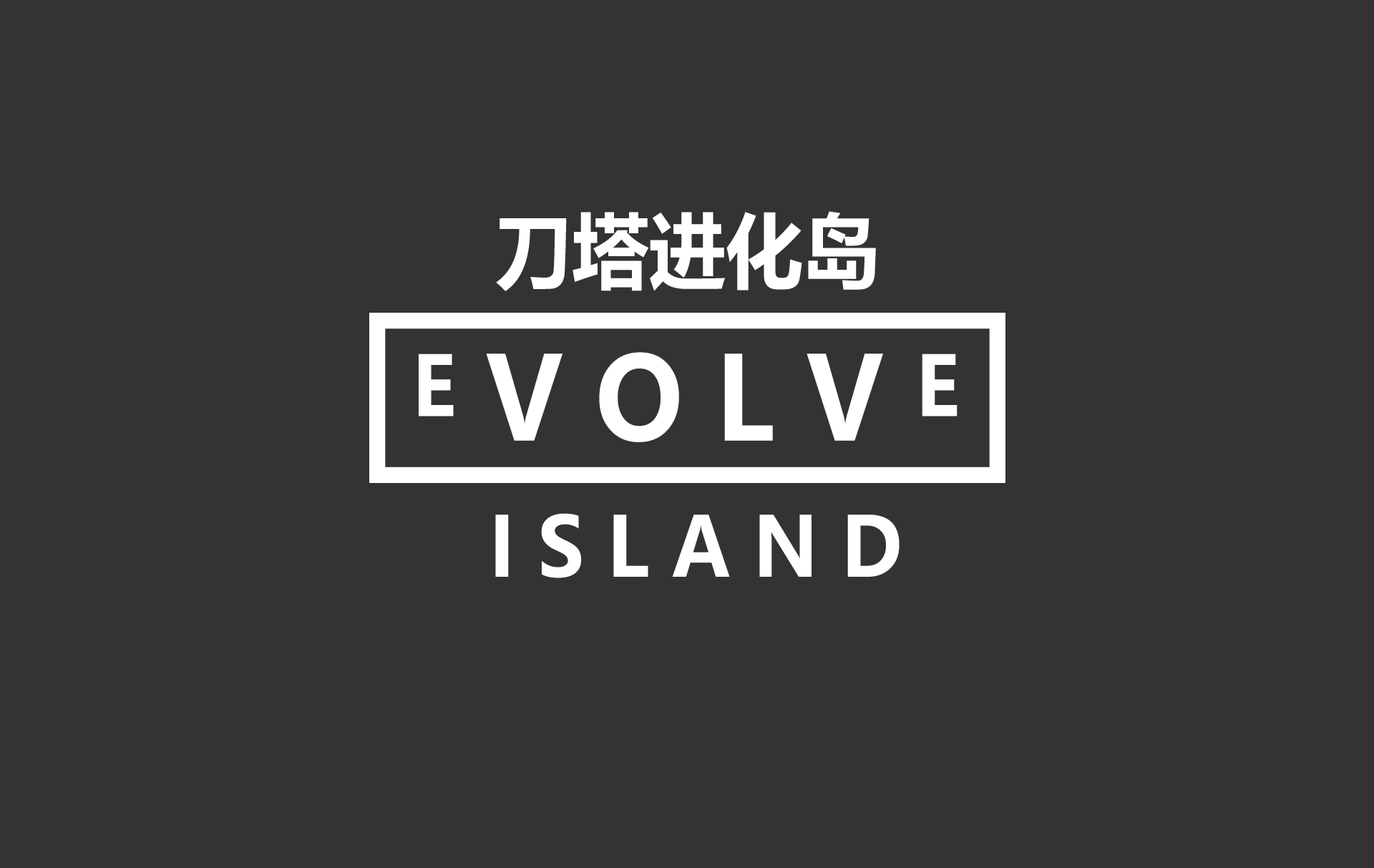
<style>
.page{position:relative;width:1374px;height:868px;background:#333333}
.page>*{position:absolute;margin:0}
.t1{font:81.8px "MicrosoftYaHei-Bold";color:#ffffff;scale:0.94 1}
.t2{font:114.6px "MicrosoftYaHei-Bold";color:#ffffff;scale:0.94 1}
.t3{font:81.9px "MicrosoftYaHei-Bold";color:#ffffff;scale:0.94 1}
</style>
<div class="page">
<p class="t1" style="left:496px;top:211px;width:380px;height:80px">刀塔进化岛</p>
<p class="t2" style="left:419px;top:352px;width:538px;height:90px"><span class="t3">E </span>V O L V <span class="t3">E</span></p>
<p class="t3" style="left:495px;top:513px;width:404px;height:65px">I S L A N D</p>
</div>
